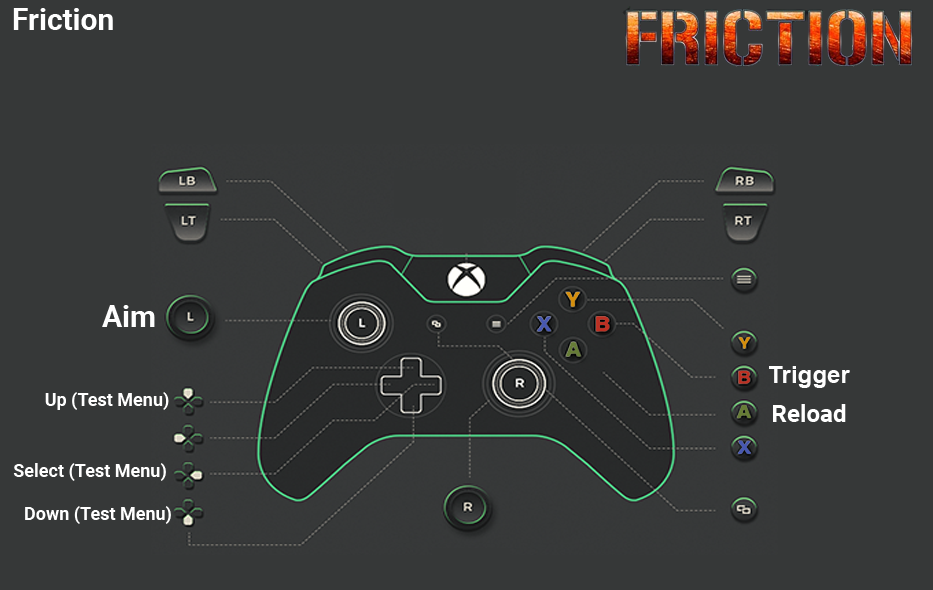
<style>
.page{position:relative;width:933px;height:590px;background:#363838}
.page>*{position:absolute;margin:0}
.t1{font:30px "Roboto-Bold";color:#ffffff}
.t2{font:30px "Roboto-Bold";color:#fefefe}
.t3{font:24px "Arial-BoldMT";color:#fefefe}
.t4{font:18px "Roboto-Bold";color:#ffffff}
.t5{font:24px "Roboto-Bold";color:#ffffff}
</style>
<div class="page">
<p class="t1" style="left:13px;top:8px;width:100px;height:22px">Friction</p>
<p class="t2" style="left:102px;top:305px;width:53px;height:22px">Aim</p>
<p class="t3" style="left:769px;top:366px;width:81px;height:22px">Trigger</p>
<p class="t4" style="left:45px;top:392px;width:124px;height:18px">Up (Test Menu)</p>
<p class="t5" style="left:773px;top:404px;width:73px;height:18px">Reload</p>
<p class="t4" style="left:13px;top:463px;width:153px;height:18px">Select (Test Menu)</p>
<p class="t4" style="left:25px;top:506px;width:146px;height:18px">Down (Test Menu)</p>
</div>
